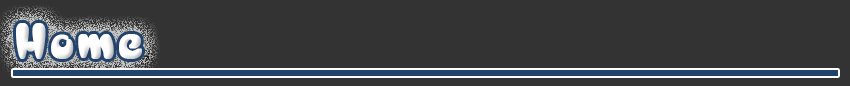
<style>
.page{position:relative;width:850px;height:86px;background:#333333}
.page>*{position:absolute;margin:0}
.t1{font:50px "Cressida";letter-spacing:0.06em;color:#ffffff;font-weight:bold;scale:1.12 1}
</style>
<div class="page">
<p class="t1" style="left:16px;top:23px;width:126px;height:36px">Home</p>
</div>
